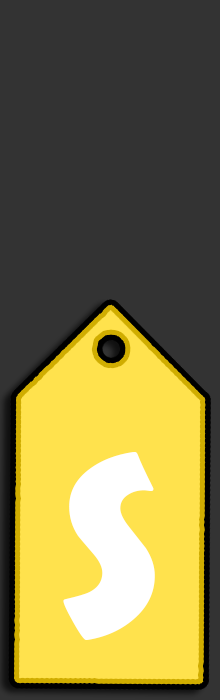
<style>
.page{position:relative;width:220px;height:700px;background:#333333}
.page>*{position:absolute;margin:0}
.t1{font:256px "BerlinSansFBDemi-Bold";letter-spacing:0.075em;color:#ffffff}
</style>
<div class="page">
<p class="t1" style="left:63px;top:452px;width:92px;height:188px">S</p>
</div>
